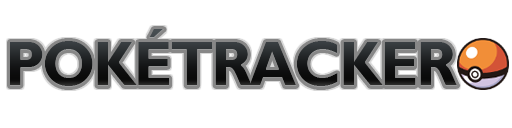
<style>
.page{position:relative;width:512px;height:128px;background:#ffffff}
.page>*{position:absolute;margin:0}
.t1{font:64px "GillSansMT-Bold";letter-spacing:-0.05em;scale:0.96 1}
</style>
<div class="page">
<p class="t1" style="left:10px;top:29px;width:448px;height:58px">POKÉTRACKER</p>
</div>
